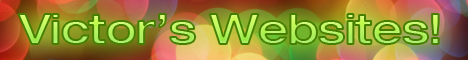
<style>
.page{position:relative;width:468px;height:60px}
.page>*{position:absolute;margin:0}
.t1{font:42px "HelveticaNeueLT-MediumExt";letter-spacing:-0.01em}
</style>
<div class="page">
<p class="t1" style="left:18px;top:14px;width:421px;height:30px">Victor’s Websites!</p>
</div>
